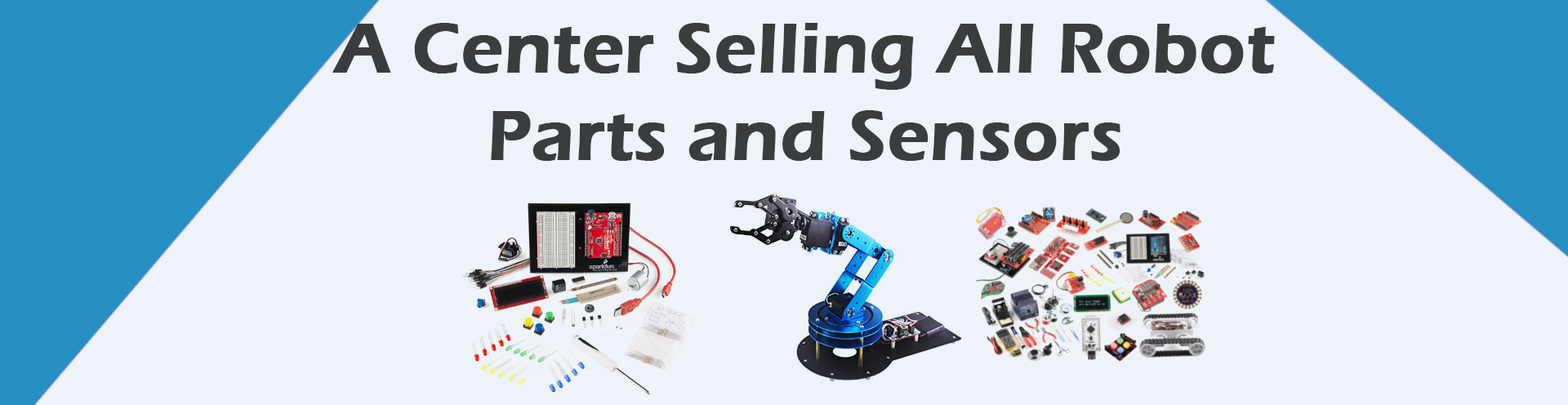
<style>
.page{position:relative;width:1568px;height:405px;background:#eef3f9}
.page>*{position:absolute;margin:0}
.t1{font:72.8px "ErasITC-Demi";color:#3b3c3d;font-weight:bold}
</style>
<div class="page">
<p class="t1" style="left:332px;top:23px;width:943px;height:138px;text-align:center">A Center Selling All Robot<br>Parts and Sensors</p>
</div>
